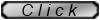
<style>
.page{position:relative;width:100px;height:20px}
.page>*{position:absolute;margin:0}
.t1{font:16px "Arial-ItalicMT";letter-spacing:0.28em;color:#000000;scale:1.06 1}
</style>
<div class="page">
<p class="t1" style="left:22px;top:4px;width:56px;height:12px">Click</p>
</div>
